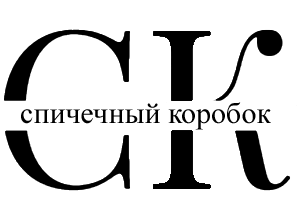
<style>
.page{position:relative;width:302px;height:212px;background:#ffffff}
.page>*{position:absolute;margin:0}
.t1{font:30px "TimesNewRomanPSMT";color:#000000}
</style>
<div class="page">
<p class="t1" style="left:21px;top:102px;width:250px;height:28px">спичечный коробок</p>
</div>
